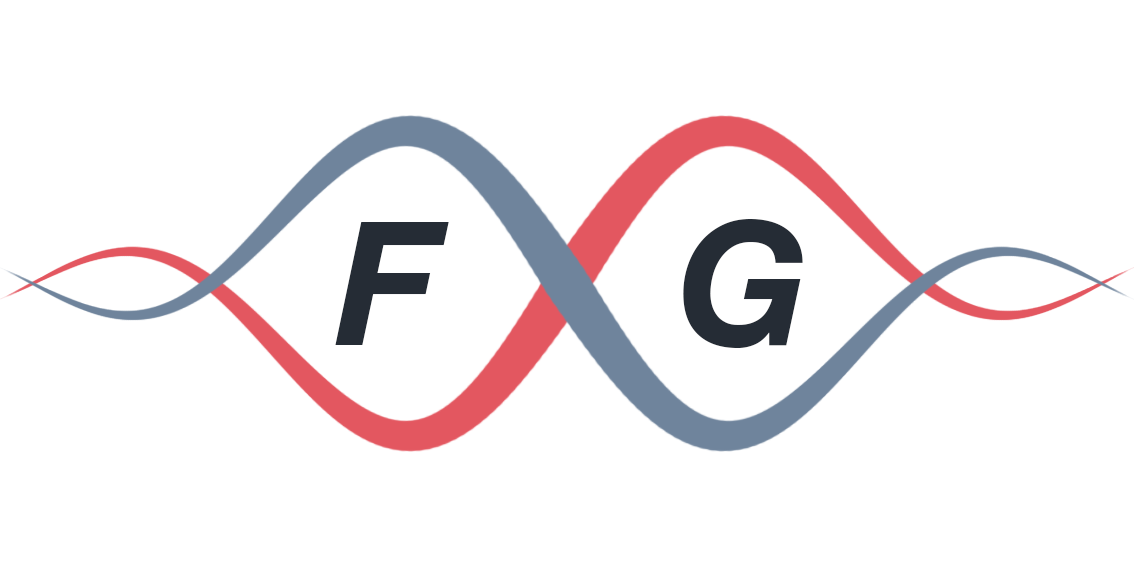
<style>
.page{position:relative;width:1134px;height:567px;background:#ffffff}
.page>*{position:absolute;margin:0}
.t1{font:172px "HelveticaNeue-BoldItalic";color:#252c35}
</style>
<div class="page">
<p class="t1" style="left:335px;top:219px;width:468px;height:129px">F     G</p>
</div>
